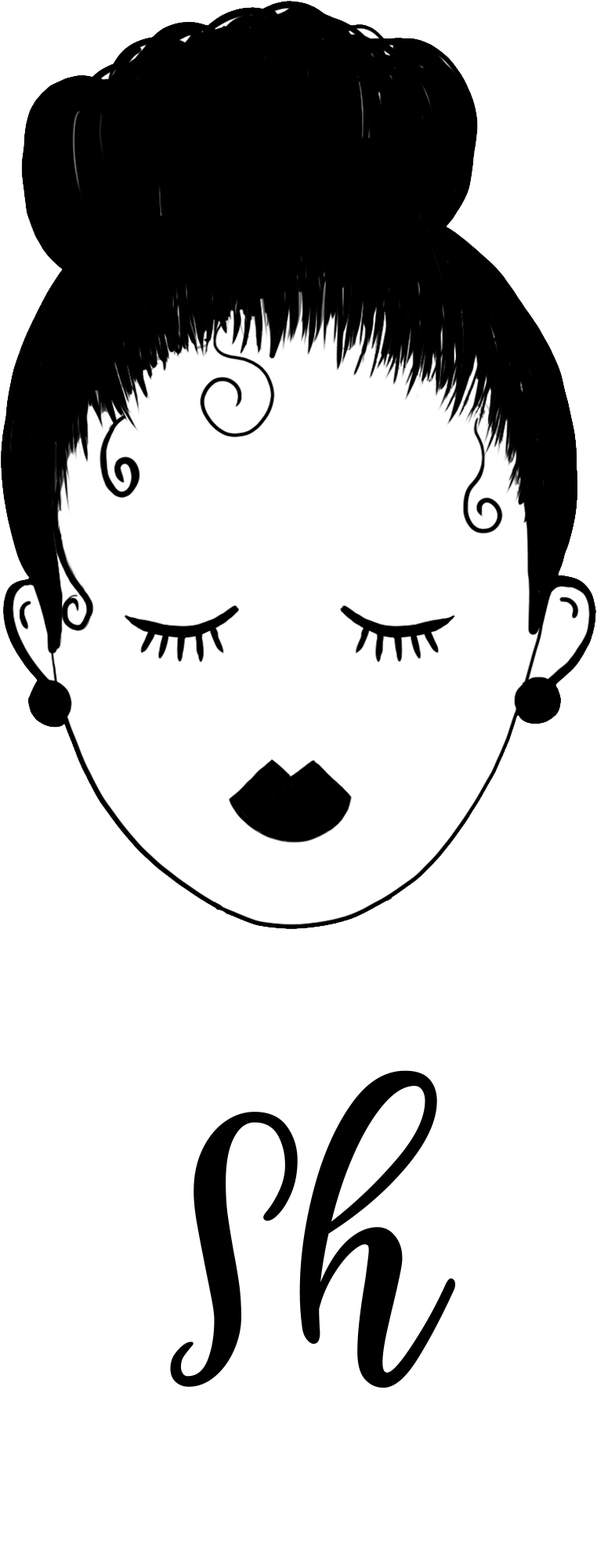
<style>
.page{position:relative;width:597px;height:1568px;background:#ffffff}
.page>*{position:absolute;margin:0}
.t1{font:457.3px "ItalianBreakfast-Regular";color:#000000}
</style>
<div class="page">
<p class="t1" style="left:170px;top:1070px;width:286px;height:318px">Sh</p>
</div>
